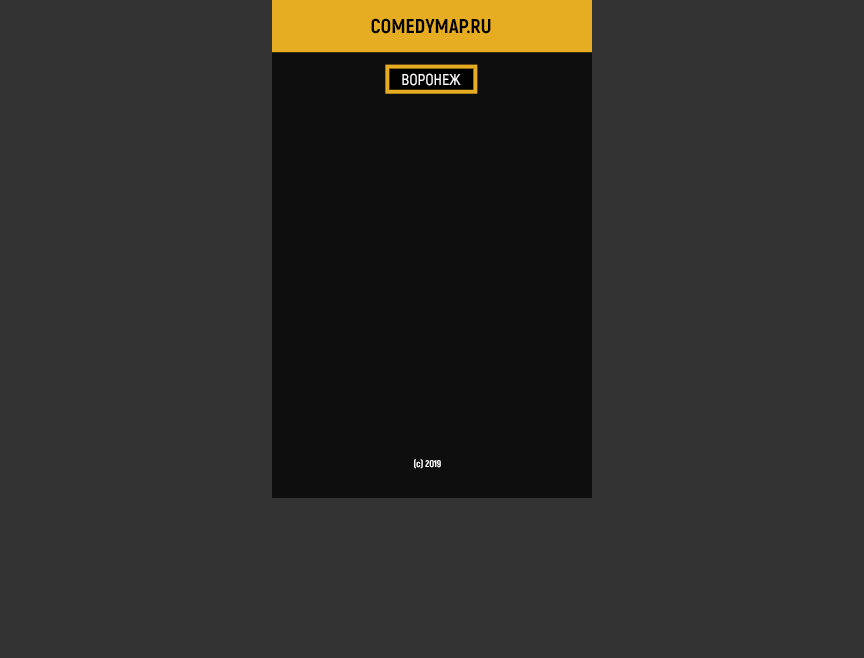
<style>
.page{position:relative;width:864px;height:658px;background:#333333}
.page>*{position:absolute;margin:0}
.t1{font:20.1px "Akrobat-ExtraBold";color:#000000;text-transform:uppercase}
.t2{font:15.8px "Akrobat-SemiBold";color:#ffffff;text-transform:uppercase}
.t3{font:9.5px "Akrobat-ExtraBold";color:#ffffff;text-transform:uppercase}
.t4{font:9.5px "Akrobat-ExtraBold";color:#ffffff}
</style>
<div class="page">
<p class="t1" style="left:371px;top:18px;width:120px;height:16px">comedymap.ru</p>
<p class="t2" style="left:402px;top:73px;width:59px;height:13px">воронеж</p>
<p class="t3" style="left:414px;top:459px;width:27px;height:10px">(<span class="t4">с</span>) 2019</p>
</div>
